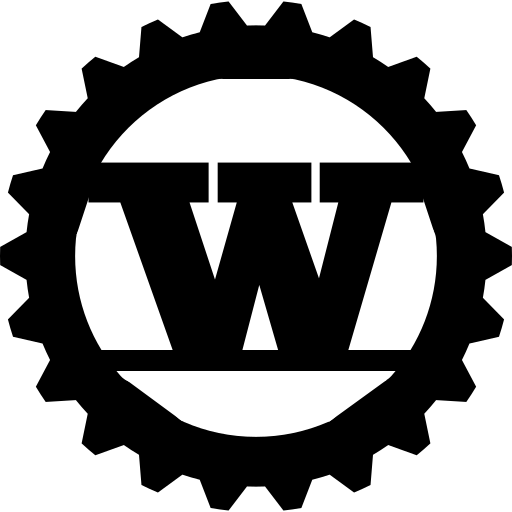
<style>
.page{position:relative;width:512px;height:512px;background:#ffffff}
.page>*{position:absolute;margin:0}
.t1{font:244.7px "OPTIEgiziano-Normal";color:#000000}
</style>
<div class="page">
<p class="t1" style="left:88px;top:162px;width:336px;height:188px">W</p>
</div>
